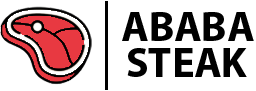
<style>
.page{position:relative;width:256px;height:91px;background:#ffffff}
.page>*{position:absolute;margin:0}
.t1{font:42px "MyriadPro-Bold";color:#000000}
</style>
<div class="page">
<p class="t1" style="left:122px;top:12px;width:132px;height:29px">ABABA</p>
<p class="t1" style="left:127px;top:48px;width:120px;height:29px">STEAK</p>
</div>
